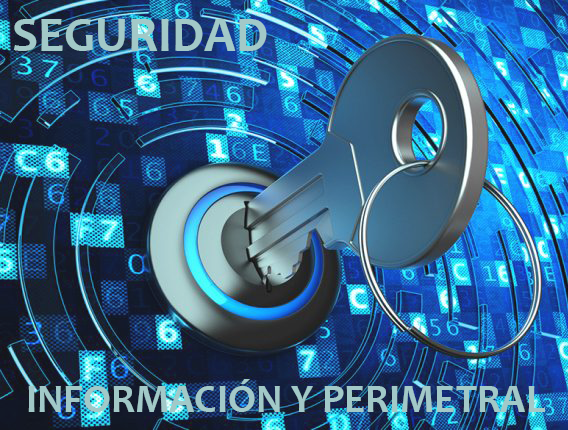
<style>
.page{position:relative;width:568px;height:430px}
.page>*{position:absolute;margin:0}
.t1{font:50px "Candara-Bold";color:#a2c9c8}
.t2{font:40px "Candara-Bold";color:#a2c9c8}
</style>
<div class="page">
<p class="t1" style="left:13px;top:19px;width:254px;height:32px">SEGURIDAD</p>
<p class="t2" style="left:28px;top:379px;width:517px;height:33px">INFORMACIÓN Y PERIMETRAL</p>
</div>
